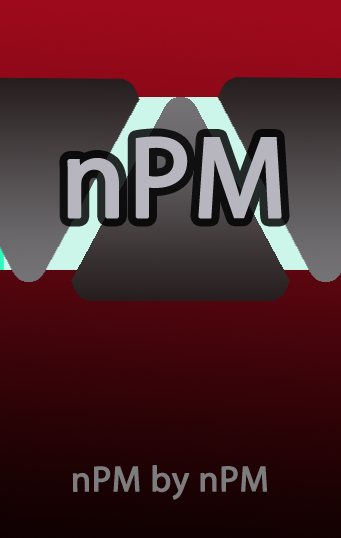
<style>
.page{position:relative;width:341px;height:538px}
.page>*{position:absolute;margin:0}
.t1{font:116px "MyriadPro-Regular";color:#b7b6bf;font-weight:bold}
.t2{font:36px "MyriadPro-Regular";color:#7d7d80;font-weight:bold}
</style>
<div class="page">
<p class="t1" style="left:67px;top:136px;width:215px;height:83px">nPM</p>
<p class="t2" style="left:72px;top:465px;width:195px;height:35px">nPM by nPM</p>
</div>
